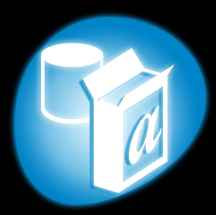
<style>
.page{position:relative;width:216px;height:215px;background:#000000}
.page>*{position:absolute;margin:0}
.t1{font:99.3px "WrexhamScript";color:#ffffff;scale:0.76 1}
</style>
<div class="page">
<p class="t1" style="left:129px;top:105px;width:33px;height:59px;rotate:-36deg">a</p>
</div>
